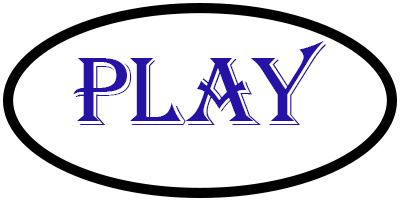
<style>
.page{position:relative;width:400px;height:200px;background:#ffffff}
.page>*{position:absolute;margin:0}
.t1{font:100px "Algerian";color:#2612a5}
</style>
<div class="page">
<p class="t1" style="left:73px;top:41px;width:253px;height:84px">Play</p>
</div>
